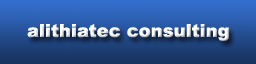
<style>
.page{position:relative;width:256px;height:64px}
.page>*{position:absolute;margin:0}
.t1{font:18px "Arial-Black";color:#ffffff}
</style>
<div class="page">
<p class="t1" style="left:27px;top:24px;width:202px;height:17px">alithiatec consulting</p>
</div>
